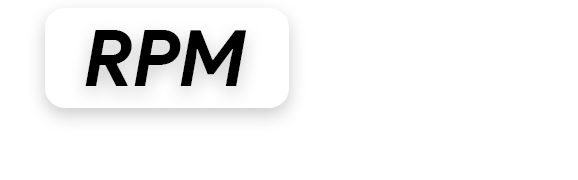
<style>
.page{position:relative;width:578px;height:180px;background:#ffffff}
.page>*{position:absolute;margin:0}
.t1{font:78px "ProductSans-BoldItalic";color:#000000}
</style>
<div class="page">
<p class="t1" style="left:85px;top:30px;width:161px;height:56px">RPM</p>
</div>
